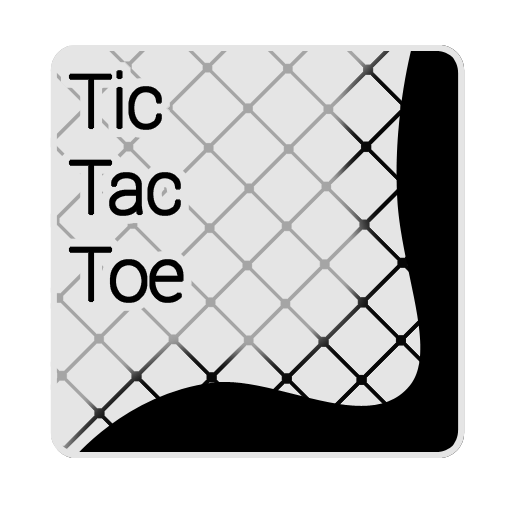
<style>
.page{position:relative;width:512px;height:512px;background:#e5e5e5}
.page>*{position:absolute;margin:0}
.t1{font:72px "Roboto-Thin";color:#000000}
</style>
<div class="page">
<p class="t1" style="left:70px;top:72px;width:112px;height:229px">Tic<br>Tac<br>Toe</p>
</div>
